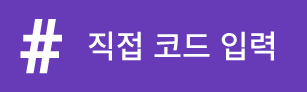
<style>
.page{position:relative;width:307px;height:92px;background:#673ab7}
.page>*{position:absolute;margin:0}
.t1{font:76.3px "Roboto-Black";letter-spacing:-0.01em;color:#ffffff}
.t2{font:31.8px "NotoSansCJKkr-Medium";letter-spacing:-0.01em;color:#ffffff}
</style>
<div class="page">
<p class="t1" style="left:20px;top:19px;width:42px;height:55px">#</p>
<p class="t2" style="left:88px;top:31px;width:186px;height:30px">직접 코드 입력</p>
</div>
